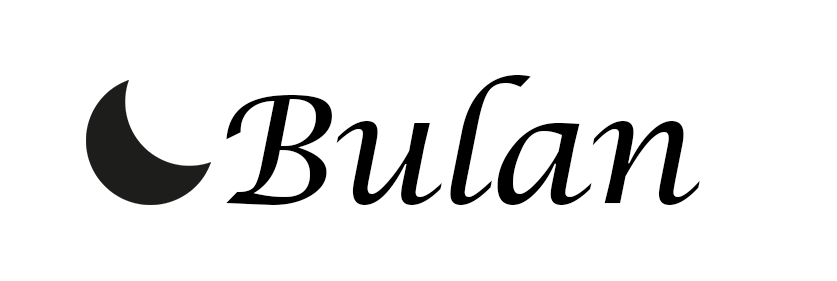
<style>
.page{position:relative;width:837px;height:281px;background:#ffffff}
.page>*{position:absolute;margin:0}
.t1{font:150px "LucidaCalligraphy-Italic";color:#000000}
</style>
<div class="page">
<p class="t1" style="left:226px;top:75px;width:474px;height:130px">Bulan</p>
</div>
